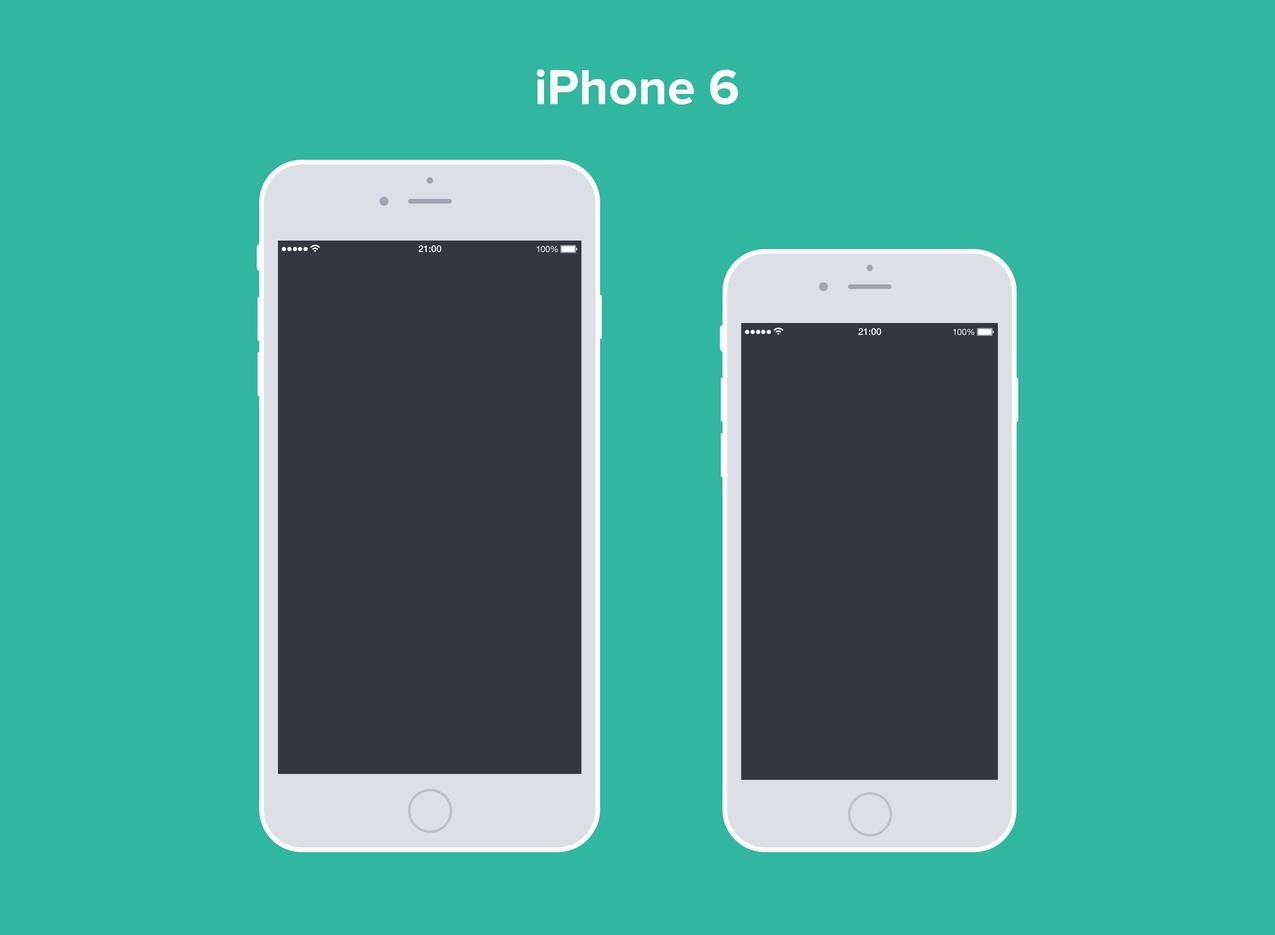
<style>
.page{position:relative;width:1275px;height:935px;background:#31b69f}
.page>*{position:absolute;margin:0}
.t1{font:51px "ProximaNova-Bold";color:#ffffff}
.t2{font:9.4px "HelveticaNeue-Medium";color:#ffffff}
.t3{font:8.5px "HelveticaNeue";color:#ffffff}
</style>
<div class="page">
<p class="t1" style="left:537px;top:69px;width:201px;height:36px">iPhone 6</p>
<p class="t2" style="left:418px;top:245px;width:24px;height:7px">21:00</p>
<p class="t3" style="left:536px;top:246px;width:22px;height:6px">100%</p>
<p class="t2" style="left:858px;top:328px;width:24px;height:7px">21:00</p>
<p class="t3" style="left:953px;top:329px;width:22px;height:6px">100%</p>
</div>
